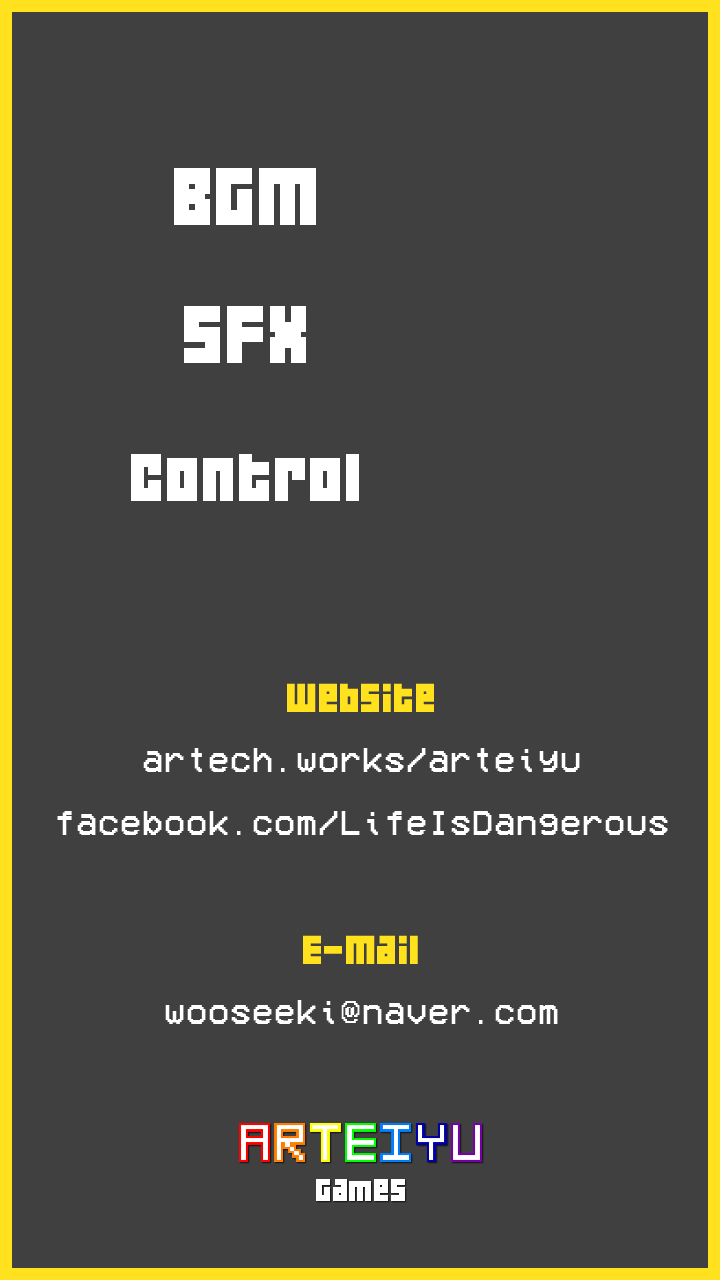
<style>
.page{position:relative;width:720px;height:1280px;background:#404040}
.page>*{position:absolute;margin:0}
.t1{font:72px "04b19";letter-spacing:0.025em;color:#ffffff}
.t2{font:60px "04b19";letter-spacing:0.025em;color:#ffffff}
.t3{font:36px "VCROSDMono";letter-spacing:0.025em;color:#ffffff}
.t4{font:36px "04b19";letter-spacing:0.025em;color:#ffe21d}
.t5{font:28px "04b19";letter-spacing:0.025em;color:#ffffff}
</style>
<div class="page">
<p class="t1" style="left:174px;top:168px;width:142px;height:57px">BGM</p>
<p class="t1" style="left:184px;top:306px;width:122px;height:57px">SFX</p>
<p class="t2" style="left:131px;top:454px;width:228px;height:47px">Control</p>
<p class="t3" style="left:57px;top:683px;width:611px;height:341px;text-align:center"><span class="t4">Website<br></span>artech.works/arteiyu<br>facebook.com/LifeIsDangerous<br><br><span class="t4">E-Mail<br></span>wooseeki@naver.com</p>
<p class="t5" style="left:316px;top:1179px;width:89px;height:22px">Games</p>
</div>
